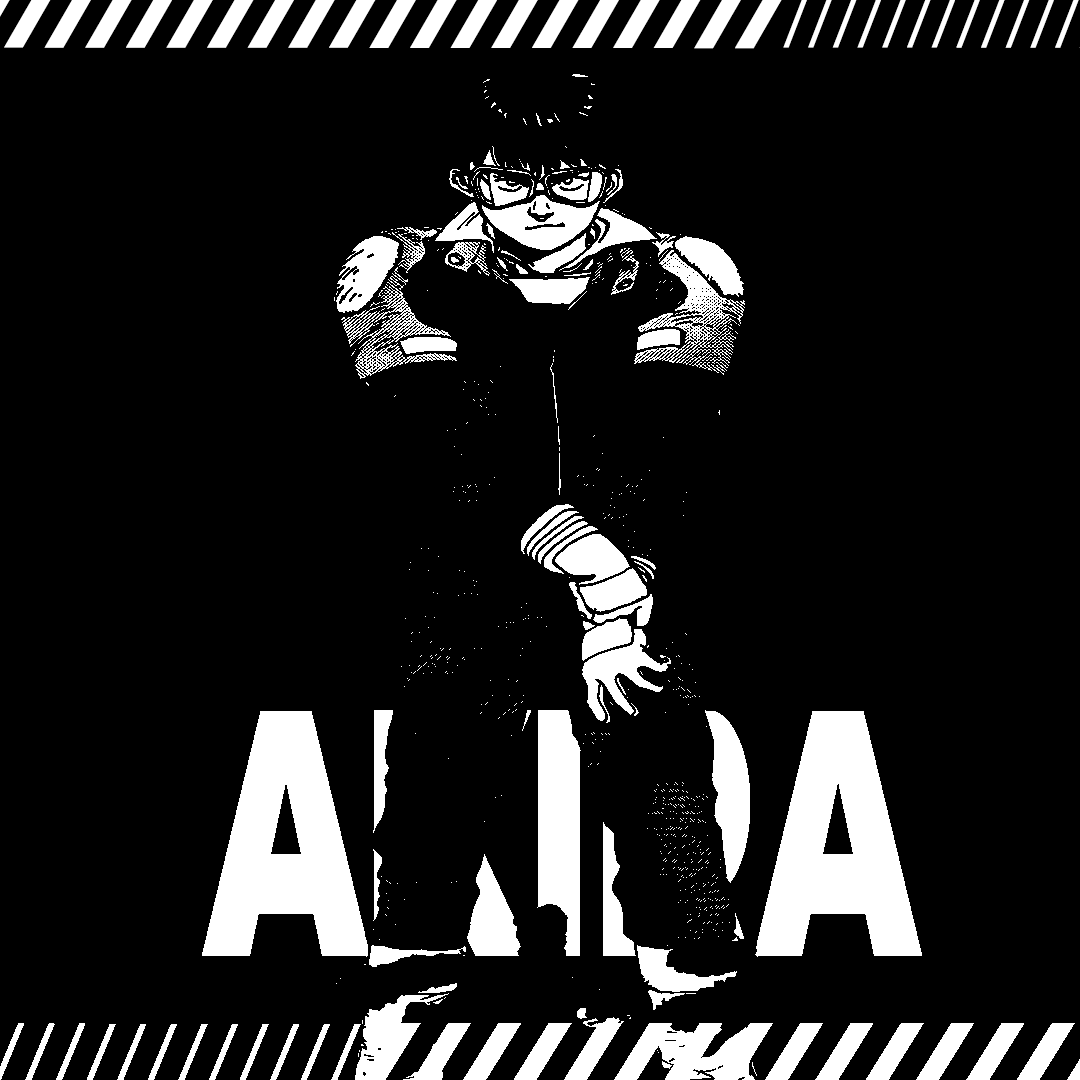
<style>
.page{position:relative;width:1080px;height:1080px;background:#000000}
.page>*{position:absolute;margin:0}
.t1{font:374.3px "AkiraExpanded-SuperBold";color:#ffffff;scale:0.45 1}
</style>
<div class="page">
<p class="t1" style="left:201px;top:710px;width:722px;height:247px">Akira</p>
</div>
